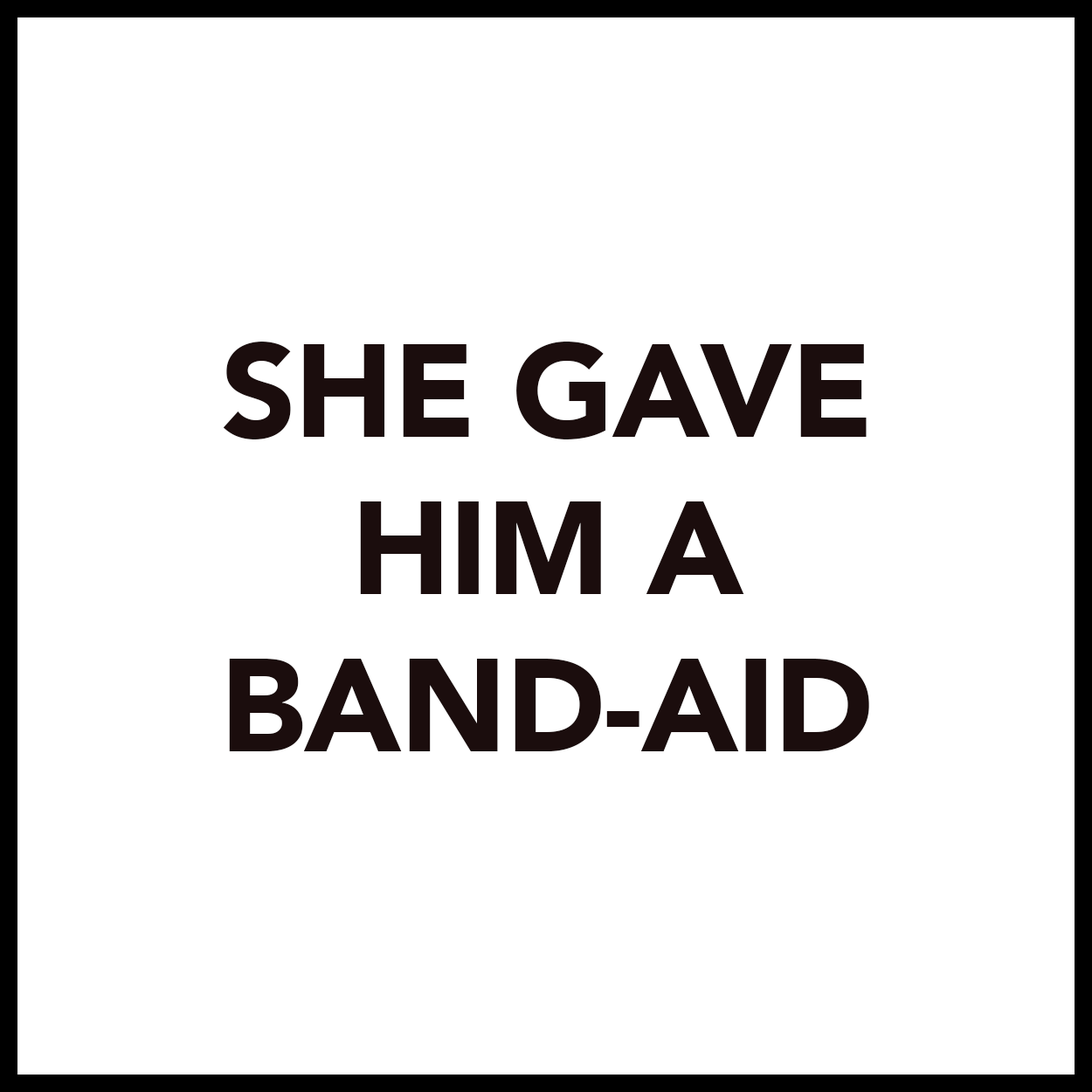
<style>
.page{position:relative;width:1092px;height:1092px;background:#ffffff}
.page>*{position:absolute;margin:0}
.t1{font:131px "Avenir-Black";letter-spacing:-0.01em;color:#1b0d0d}
</style>
<div class="page">
<p class="t1" style="left:223px;top:342px;width:646px;height:409px;text-align:center">SHE GAVE<br>HIM A<br>BAND-AID</p>
</div>
